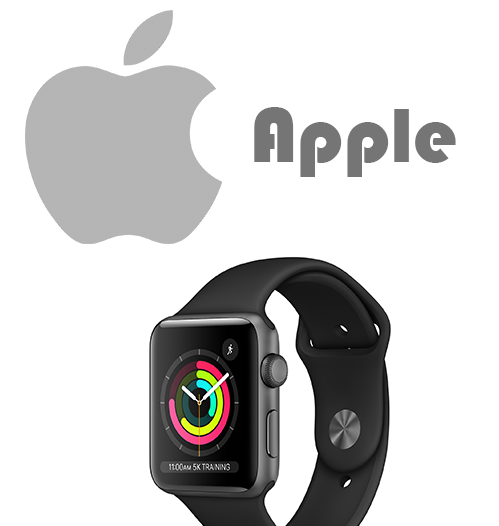
<style>
.page{position:relative;width:499px;height:526px;background:#ffffff}
.page>*{position:absolute;margin:0}
.t1{font:80px "Bauhaus93";color:#757575}
</style>
<div class="page">
<p class="t1" style="left:254px;top:107px;width:202px;height:70px">Apple</p>
</div>
